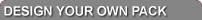
<style>
.page{position:relative;width:202px;height:20px;background:#858585}
.page>*{position:absolute;margin:0}
.t1{font:12.8px "Arial-BoldMT";color:#ffffff}
</style>
<div class="page">
<p class="t1" style="left:4px;top:6px;width:163px;height:10px">DESIGN YOUR OWN PACK</p>
</div>
